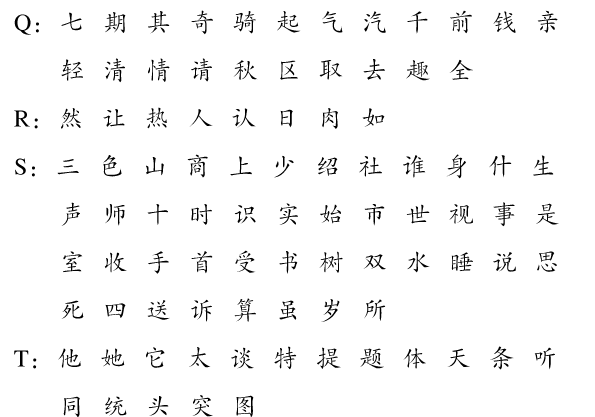
<style>
.page{position:relative;width:595px;height:417px;background:#ffffff}
.page>*{position:absolute;margin:0}
.t1{font:24px/48px "CTKaiTiSJ";letter-spacing:0.1em;color:#000000}
.t2{font:24px/48px "CTKaiTiSJ";letter-spacing:0.1em;color:#ffffff}
</style>
<div class="page">
<p class="t1" style="left:14px;top:10px;width:579px;height:409px">Q：七  期  其  奇  骑  起  气  汽  千  前  钱  亲  <br><span class="t2">Q：</span>轻  清  情  请  秋  区  取  去  趣  全<br>R：然  让  热  人  认  日  肉  如<br>S：三  色  山  商  上  少  绍  社  谁  身  什  生  <br><span class="t2">Q：</span>声  师  十  时  识  实  始  市  世  视  事  是  <span class="t2">Q：</span>室  收  手  首  受  书  树  双  水  睡  说  思  <br><span class="t2">Q：</span>死  四  送  诉  算  虽  岁  所 <br>T：他  她  它  太  谈  特  提  题  体  天  条  听  <span class="t2">Q<br>Q：</span>同  统  头  突  图</p>
</div>
